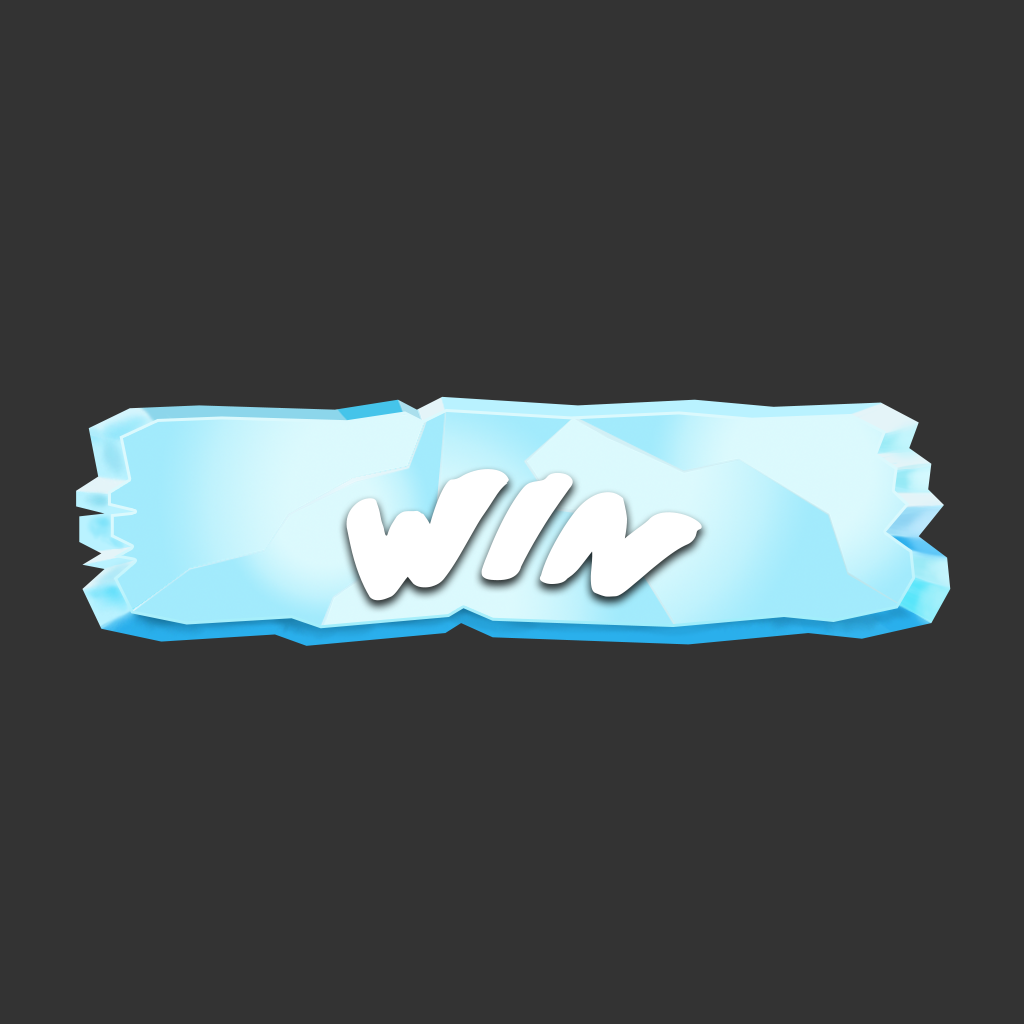
<style>
.page{position:relative;width:1024px;height:1024px;background:#333333}
.page>*{position:absolute;margin:0}
.t1{font:132.6px "Knewave-Regular";color:#ffffff}
</style>
<div class="page">
<p class="t1" style="left:346px;top:469px;width:356px;height:132px;rotate:2deg">WIN</p>
</div>
